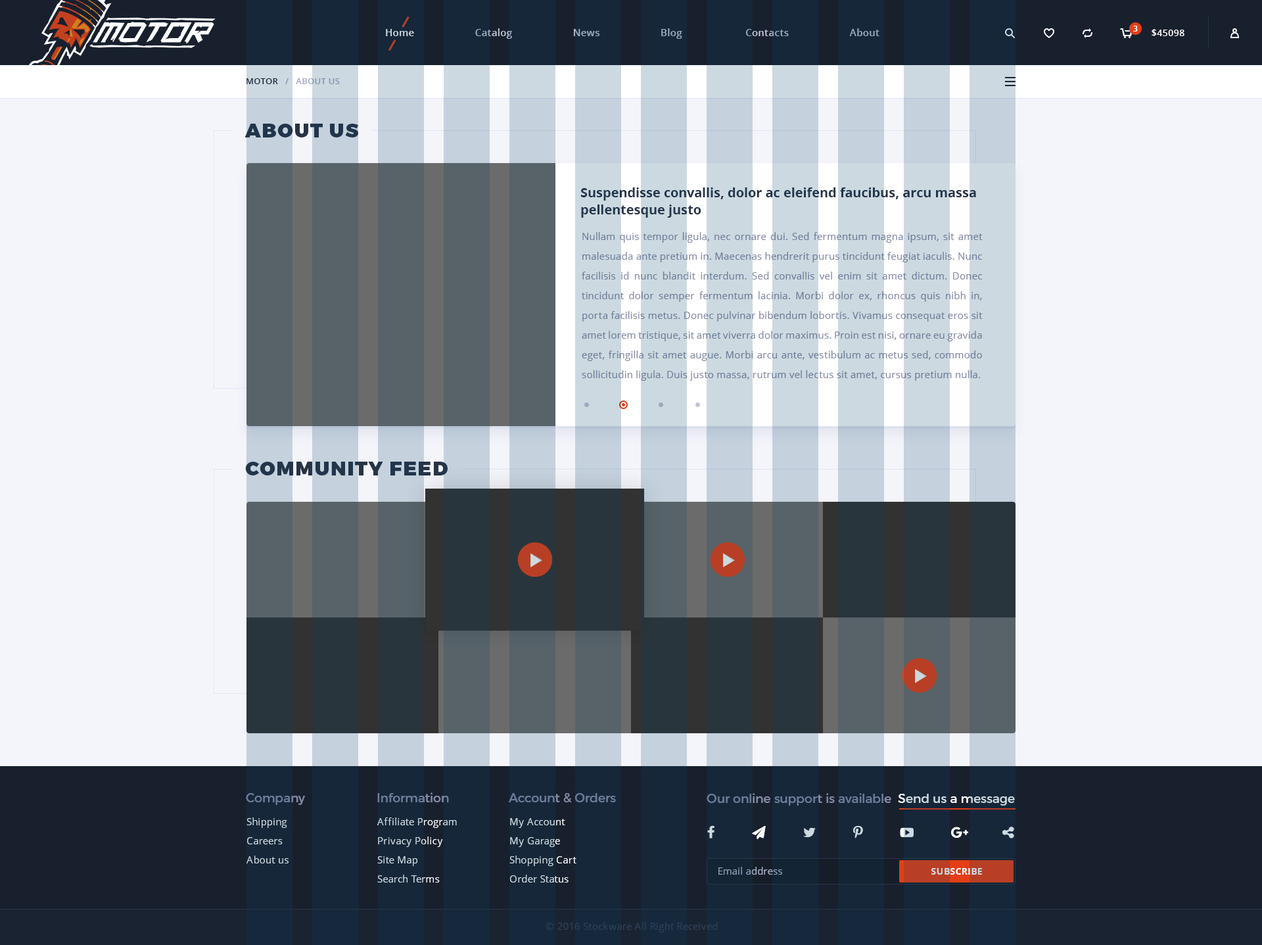
<style>
.page{position:relative;width:1262px;height:945px;background:#f4f5fb}
.page>*{position:absolute;margin:0}
.t1{font:9.9px "OpenSans-Semibold";letter-spacing:0.02em}
.t2{font:7.9px "OpenSans-Bold";color:#ffffff}
.t3{font:9.2px "OpenSans-Semibold";letter-spacing:0.02em;color:#ffffff;text-transform:uppercase}
.t4{font:8.5px "OpenSans-Semibold";letter-spacing:0.02em;text-transform:uppercase}
.t5{font:19.7px "Montserrat-Black";letter-spacing:0.06em;color:#283346;text-transform:uppercase}
.t6{font:13.1px/17.1px "OpenSans-Bold";color:#283346}
.t7{font:9.9px/19.7px "OpenSans";letter-spacing:0.02em}
.t8{font:12.5px "Montserrat-Regular";color:#6d7d99}
.t9{font:12.5px "Montserrat-Regular"}
.t10{font:9.9px/19.1px "OpenSans";letter-spacing:0.02em;color:#cdd9e0}
.t11{font:9.9px "OpenSans";letter-spacing:0.02em}
.t12{font:9.2px "OpenSans-Bold";letter-spacing:0.02em}
.t13{font:9.9px "OpenSans";letter-spacing:0.02em;color:#324057}
</style>
<div class="page">
<p class="t1" style="left:386px;top:28px;width:494px;height:11px">Home                      Catalog                      News                      Blog                       Contacts                      About</p>
<p class="t2" style="left:1133px;top:26px;width:5px;height:6px">3</p>
<p class="t3" style="left:1152px;top:29px;width:33px;height:7px">$45098</p>
<p class="t4" style="left:247px;top:78px;width:93px;height:6px">Motor   /   About Us</p>
<p class="t5" style="left:245px;top:124px;width:114px;height:13px">about us</p>
<p class="t6" style="left:580px;top:187px;width:396px;height:31px">Suspendisse convallis, dolor ac eleifend faucibus, arcu massa<br>pellentesque justo</p>
<p class="t7" style="left:582px;top:232px;width:401px;height:149px;text-align:justify">Nullam quis tempor ligula, nec ornare dui. Sed fermentum magna ipsum, sit amet malesuada ante pretium in. Maecenas hendrerit purus tincidunt feugiat iaculis. Nunc facilisis id nunc blandit interdum. Sed convallis vel enim sit amet dictum. Donec tincidunt dolor semper fermentum lacinia. Morbi dolor ex, rhoncus quis nibh in, porta facilisis metus. Donec pulvinar bibendum lobortis. Vivamus consequat eros sit amet lorem tristique, sit amet viverra dolor maximus. Proin est nisi, ornare eu gravida eget, fringilla sit amet augue. Morbi arcu ante, vestibulum ac metus sed, commodo sollicitudin ligula. Duis justo massa, rutrum vel lectus sit amet, cursus pretium nulla.</p>
<p class="t5" style="left:245px;top:462px;width:203px;height:13px">community feed</p>
<p class="t8" style="left:246px;top:793px;width:59px;height:12px">Company</p>
<p class="t8" style="left:377px;top:792px;width:72px;height:10px">Information</p>
<p class="t8" style="left:509px;top:793px;width:107px;height:10px">Account &amp; Orders</p>
<p class="t9" style="left:707px;top:793px;width:308px;height:12px">Our online support is available  Send us a message</p>
<p class="t10" style="left:247px;top:817px;width:42px;height:46px">Shipping<br>Careers<br>About us</p>
<p class="t10" style="left:377px;top:817px;width:80px;height:65px">Affiliate Program<br>Privacy Policy<br>Site Map<br>Search Terms</p>
<p class="t10" style="left:509px;top:818px;width:68px;height:64px">My Account<br>My Garage<br>Shopping Cart<br>Order Status</p>
<p class="t11" style="left:719px;top:866px;width:63px;height:8px">Email address</p>
<p class="t12" style="left:932px;top:868px;width:50px;height:6px">SUBSCRIBE</p>
<p class="t13" style="left:546px;top:922px;width:172px;height:10px">© 2016 Stockware All Right Received</p>
</div>
